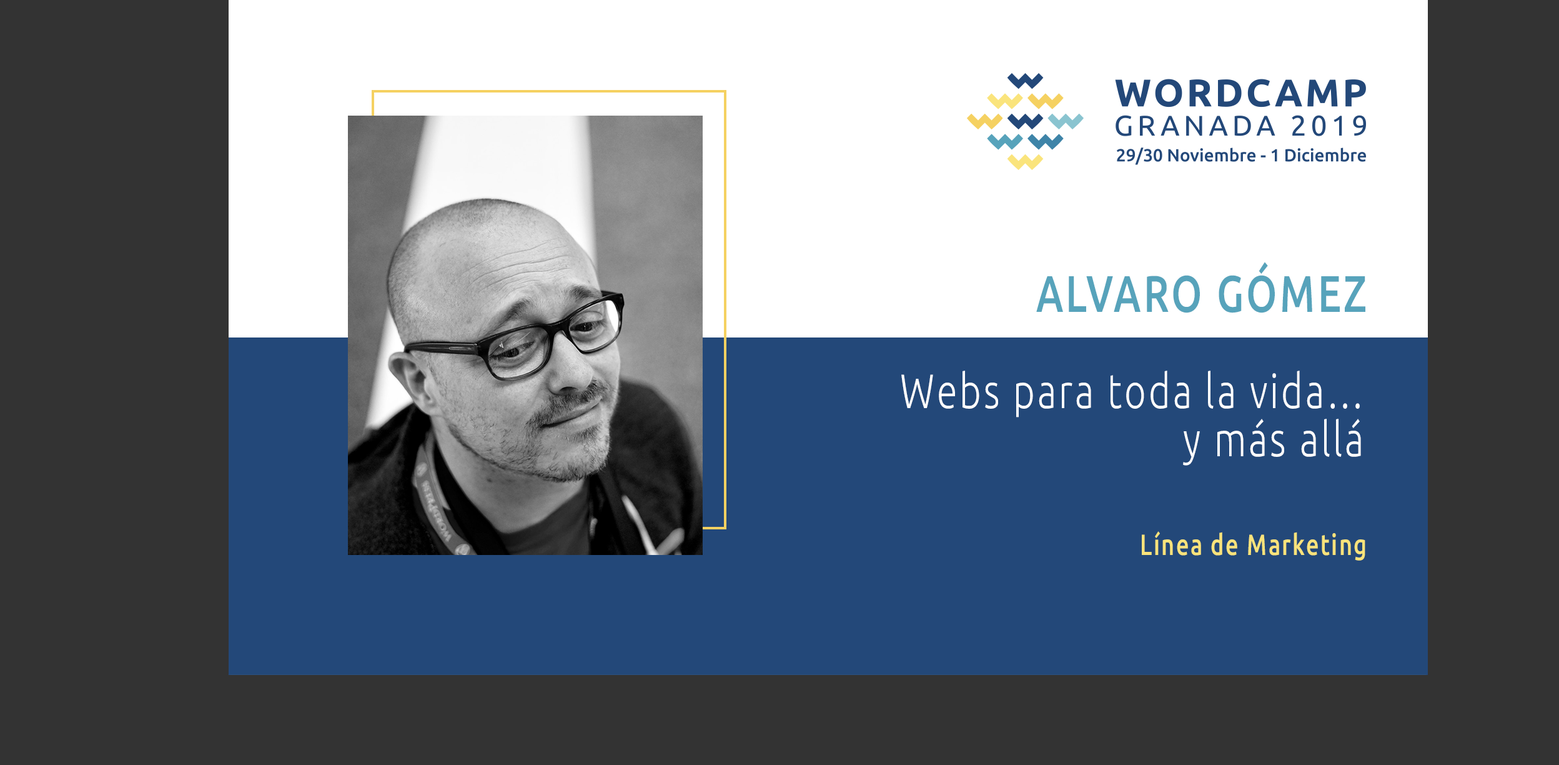
<style>
.page{position:relative;width:1559px;height:765px;background:#333333}
.page>*{position:absolute;margin:0}
.t1{font:51.4px "Ubuntu-Medium";letter-spacing:0.068em;color:#57a3bb;scale:0.77 1}
.t2{font:48.2px/48.2px "Ubuntu-Light";letter-spacing:0.068em;color:#ffffff;scale:0.77 1}
.t3{font:29.2px "Ubuntu-Medium";letter-spacing:0.068em;color:#f9e37b;scale:0.77 1}
</style>
<div class="page">
<p class="t1" style="left:1036px;top:262px;width:330px;height:51px">ALVARO GÓMEZ</p>
<p class="t2" style="left:902px;top:370px;width:459px;height:95px;text-align:right">Webs para toda la vida…<br>y más allá</p>
<p class="t3" style="left:1142px;top:531px;width:224px;height:29px">Línea de Marketing</p>
</div>
